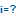
<style>
.page{position:relative;width:16px;height:16px;background:#ffffff}
.page>*{position:absolute;margin:0}
.t1{font:10px "Small Fonts";color:#005999}
</style>
<div class="page">
<p class="t1" style="left:0px;top:5px;width:16px;height:8px">i = ?</p>
</div>
